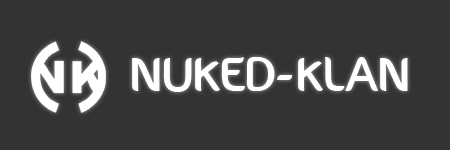
<style>
.page{position:relative;width:450px;height:150px;background:#333333}
.page>*{position:absolute;margin:0}
.t1{font:47.5px "Fontastique-Fontastique";color:#ffffff}
</style>
<div class="page">
<p class="t1" style="left:132px;top:57px;width:276px;height:35px">NUKED-KLAN</p>
</div>
